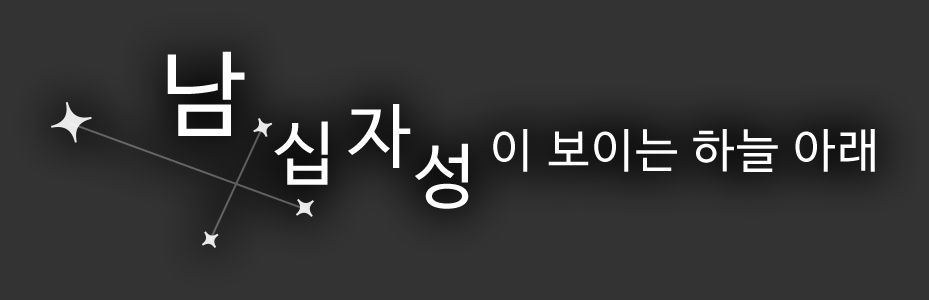
<style>
.page{position:relative;width:929px;height:300px;background:#333333}
.page>*{position:absolute;margin:0}
.t1{font:93.5px "NanumBarunGothic";color:#ffffff}
.t2{font:70.1px "NanumBarunGothic";color:#ffffff}
.t3{font:46.8px "NanumBarunGothic";letter-spacing:0.05em;color:#ffffff}
</style>
<div class="page">
<p class="t1" style="left:167px;top:51px;width:78px;height:85px">남</p>
<p class="t2" style="left:348px;top:104px;width:63px;height:64px">자</p>
<p class="t2" style="left:274px;top:121px;width:54px;height:64px">십</p>
<p class="t3" style="left:493px;top:129px;width:382px;height:43px">이 보이는 하늘 아래</p>
<p class="t2" style="left:415px;top:143px;width:54px;height:66px">성</p>
</div>
